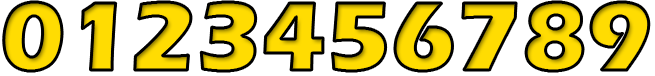
<style>
.page{position:relative;width:655px;height:76px;background:#ffffff}
.page>*{position:absolute;margin:0}
.t1{font:100px "ErasITC-Bold";color:#ffd305}
</style>
<div class="page">
<p class="t1" style="left:3px;top:2px;width:646px;height:69px">0123456789</p>
</div>
